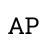
<style>
.page{position:relative;width:50px;height:50px;background:#ffffff}
.page>*{position:absolute;margin:0}
.t1{font:23px "RobotoSlab-Regular";color:#010101}
</style>
<div class="page">
<p class="t1" style="left:8px;top:17px;width:31px;height:17px">AP</p>
</div>
